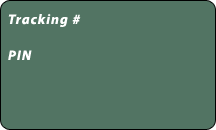
<style>
.page{position:relative;width:216px;height:130px;background:#527463}
.page>*{position:absolute;margin:0}
.t1{font:14px/36px "Myriad-BoldItalic";letter-spacing:0.075em;color:#ffffff}
</style>
<div class="page">
<p class="t1" style="left:8px;top:13px;width:73px;height:47px">Tracking #<br>PIN</p>
</div>
